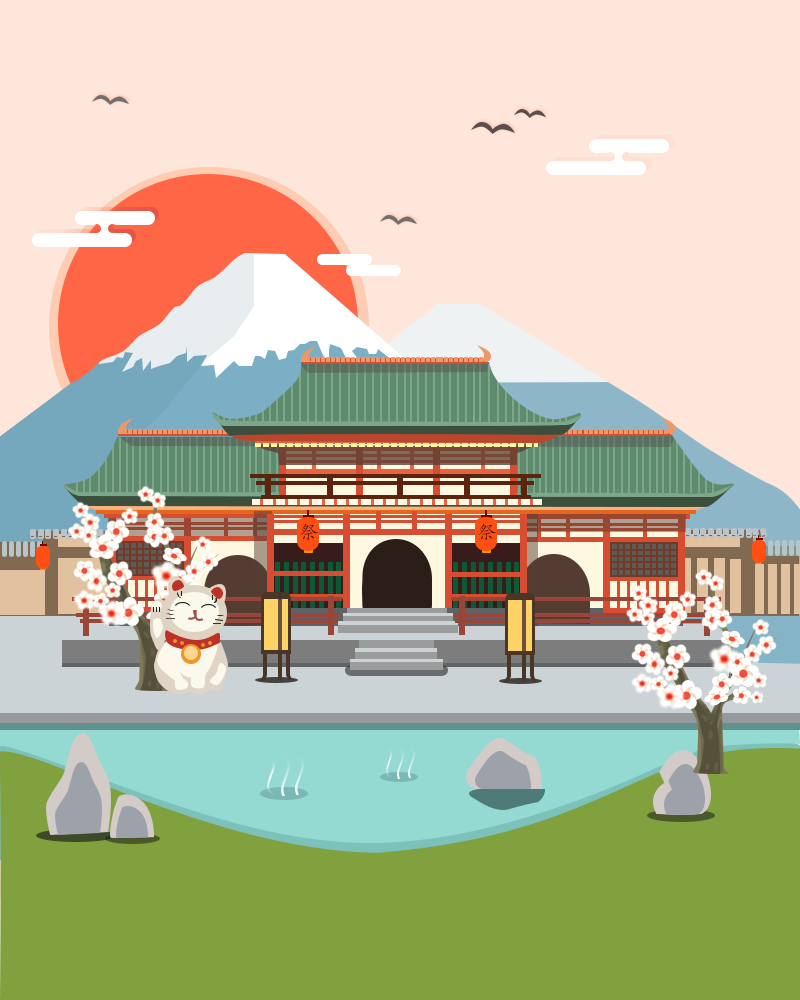
<style>
.page{position:relative;width:800px;height:1000px;background:#fee6da}
.page>*{position:absolute;margin:0}
.t1{font:20px "STKaiti";letter-spacing:0.04em;color:#3f1913}
</style>
<div class="page">
<p class="t1" style="left:300px;top:523px;width:18px;height:18px">祭</p>
<p class="t1" style="left:478px;top:523px;width:18px;height:18px">祭</p>
</div>
